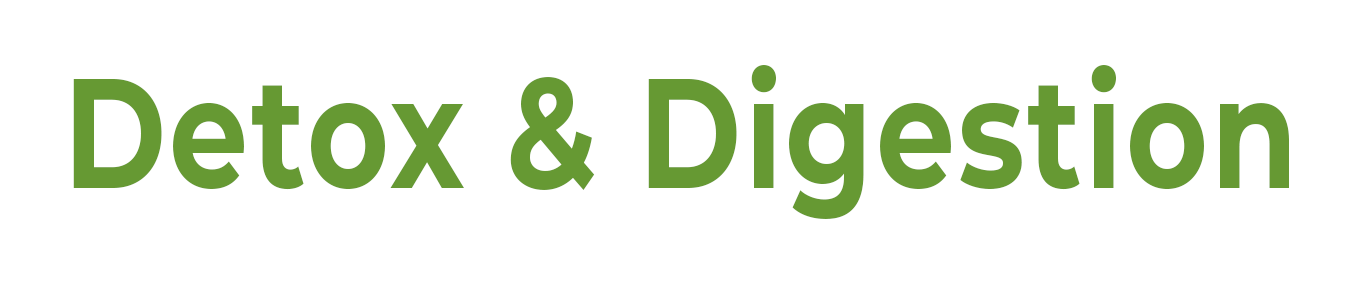
<style>
.page{position:relative;width:1366px;height:300px;background:#ffffff}
.page>*{position:absolute;margin:0}
.t1{font:156.2px "Montserrat-Bold";letter-spacing:0.025em;color:#669933;scale:0.8 1}
</style>
<div class="page">
<p class="t1" style="left:73px;top:65px;width:1216px;height:154px">Detox &amp; Digestion</p>
</div>
